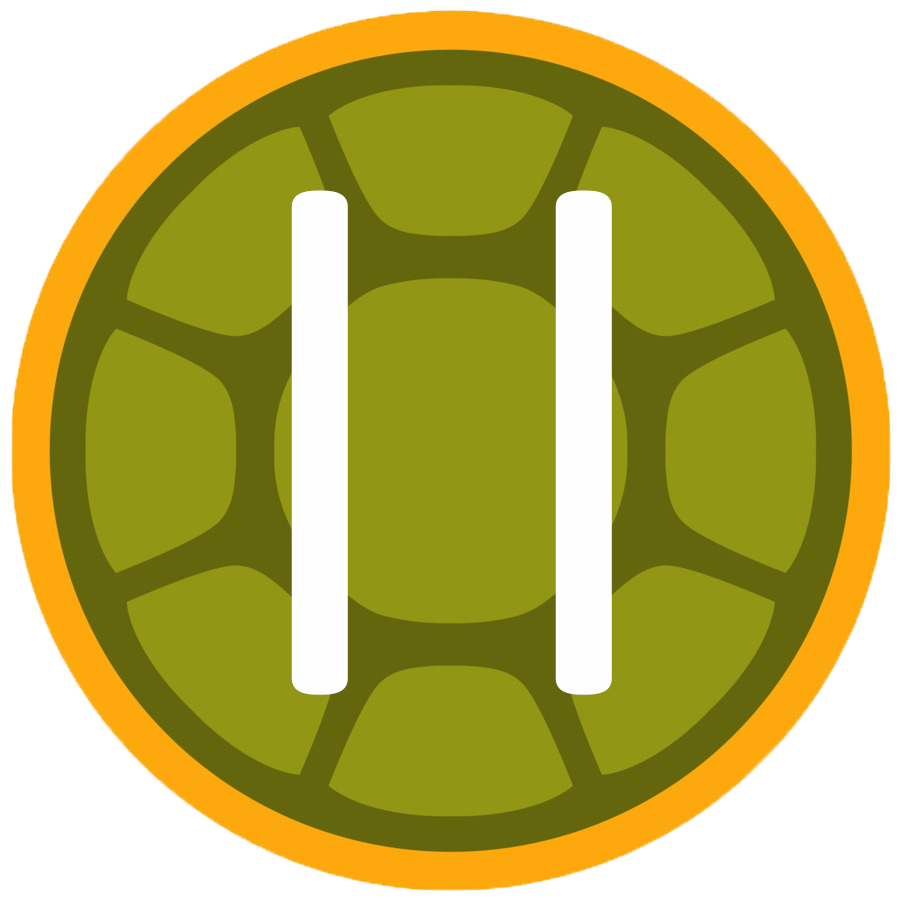
<style>
.page{position:relative;width:900px;height:900px;background:#919615}
.page>*{position:absolute;margin:0}
.t1{font:557.2px "Calibri";color:#fefefe;font-weight:bold}
</style>
<div class="page">
<p class="t1" style="left:291px;top:190px;width:321px;height:505px">||</p>
</div>
